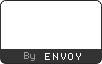
<style>
.page{position:relative;width:102px;height:64px;background:#ffffff}
.page>*{position:absolute;margin:0}
.t1{font:9px "Volter(Goldfish)-Regular";color:#999999}
.t2{font:9px "Volter(Goldfish)-Regular";letter-spacing:0.2em;color:#ffffff}
</style>
<div class="page">
<p class="t1" style="left:24px;top:52px;width:11px;height:9px">By</p>
<p class="t2" style="left:45px;top:53px;width:36px;height:7px">ENVOY</p>
</div>
